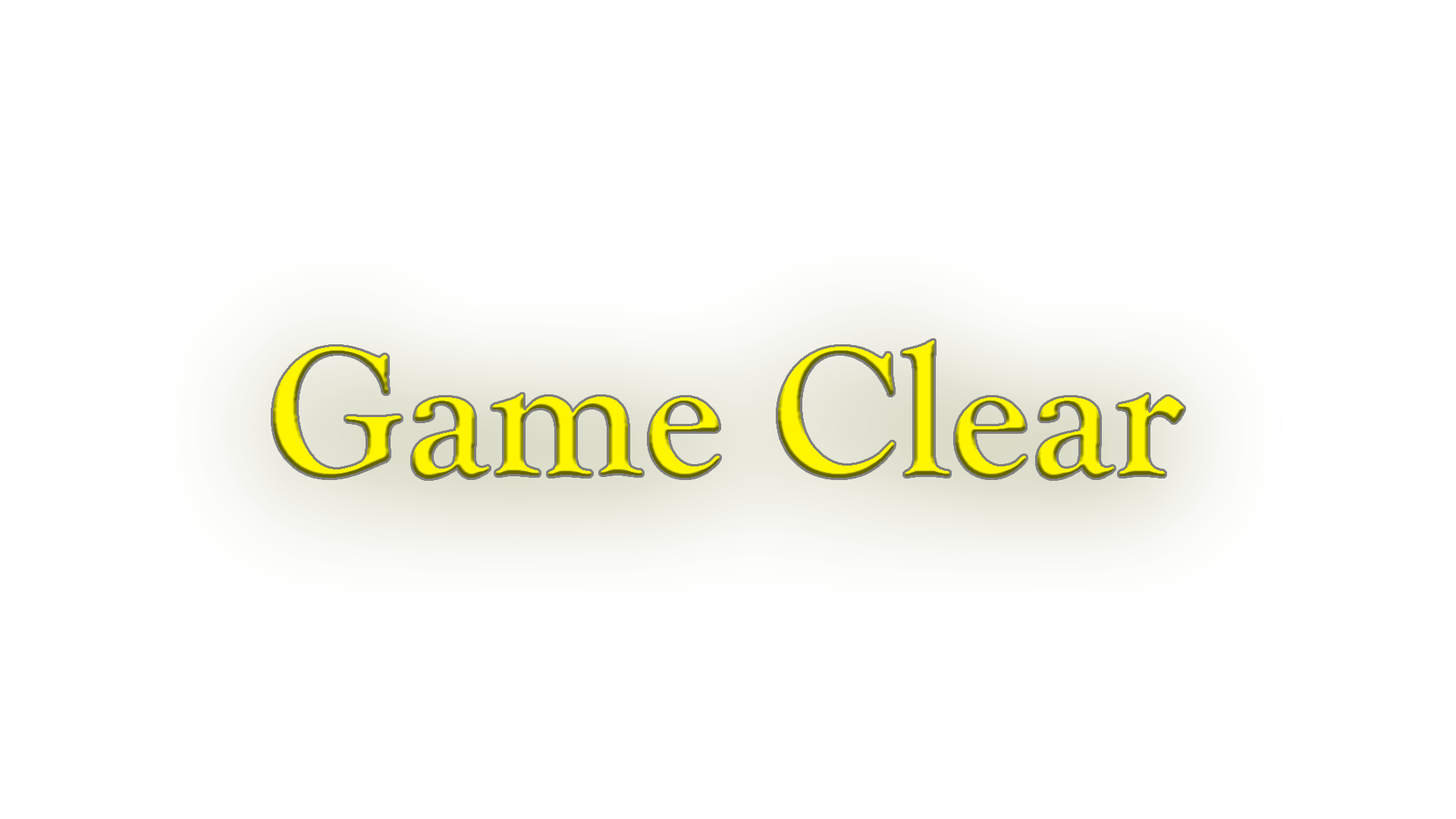
<style>
.page{position:relative;width:1456px;height:819px;background:#ffffff}
.page>*{position:absolute;margin:0}
.t1{font:189.6px "GoudyOldStyleT-Bold";color:#fff600}
</style>
<div class="page">
<p class="t1" style="left:273px;top:340px;width:911px;height:139px">Game Clear</p>
</div>
